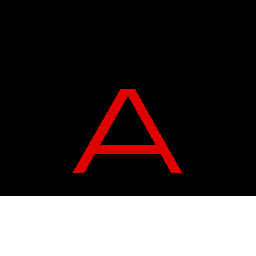
<style>
.page{position:relative;width:256px;height:256px;background:#000000}
.page>*{position:absolute;margin:0}
.t1{font:112px "Michroma";color:#df0000}
</style>
<div class="page">
<p class="t1" style="left:73px;top:89px;width:109px;height:84px">A</p>
</div>
